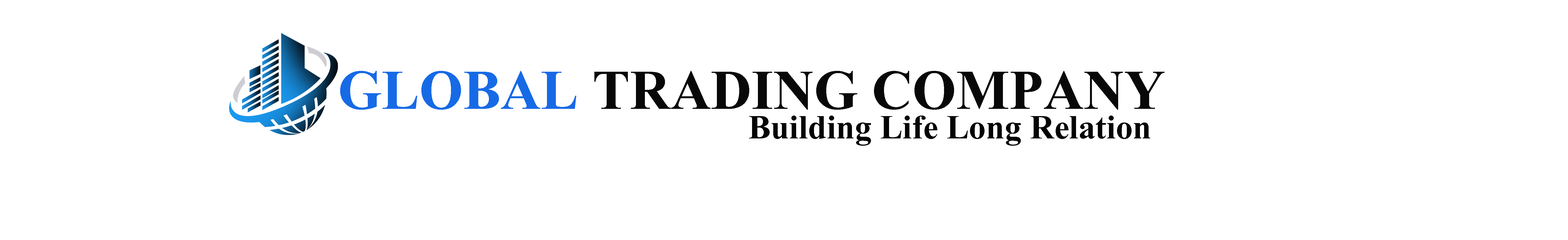
<style>
.page{position:relative;width:1568px;height:240px;background:#ffffff}
.page>*{position:absolute;margin:0}
.t1{font:69.8px "Aparajita-Bold";color:#080808}
.t2{font:69.8px "Aparajita-Bold";color:#176ae6}
.t3{font:41.9px "Aparajita-Bold";color:#040404}
</style>
<div class="page">
<p class="t1" style="left:340px;top:71px;width:824px;height:39px"><span class="t2">GLOBAL </span>TRADING COMPANY</p>
<p class="t3" style="left:749px;top:116px;width:401px;height:30px">Building Life Long Relation</p>
</div>
